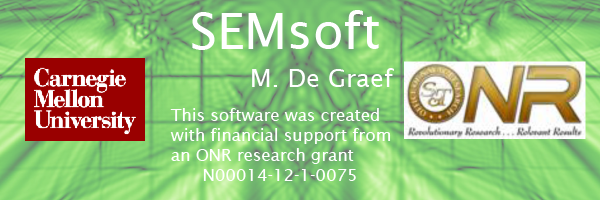
<style>
.page{position:relative;width:600px;height:200px}
.page>*{position:absolute;margin:0}
.t1{font:50px "LucidaSans";color:#ffffff}
.t2{font:25px "LucidaSans";color:#ffffff}
.t3{font:16.7px "LucidaSans";color:#ffffff}
</style>
<div class="page">
<p class="t1" style="left:192px;top:10px;width:187px;height:40px">SEMsoft</p>
<p class="t2" style="left:252px;top:68px;width:142px;height:19px">M. De Graef</p>
<p class="t3" style="left:170px;top:108px;width:221px;height:73px">This software was created<br>with financial support from<br>an ONR research grant<br>      N00014-12-1-0075</p>
</div>
